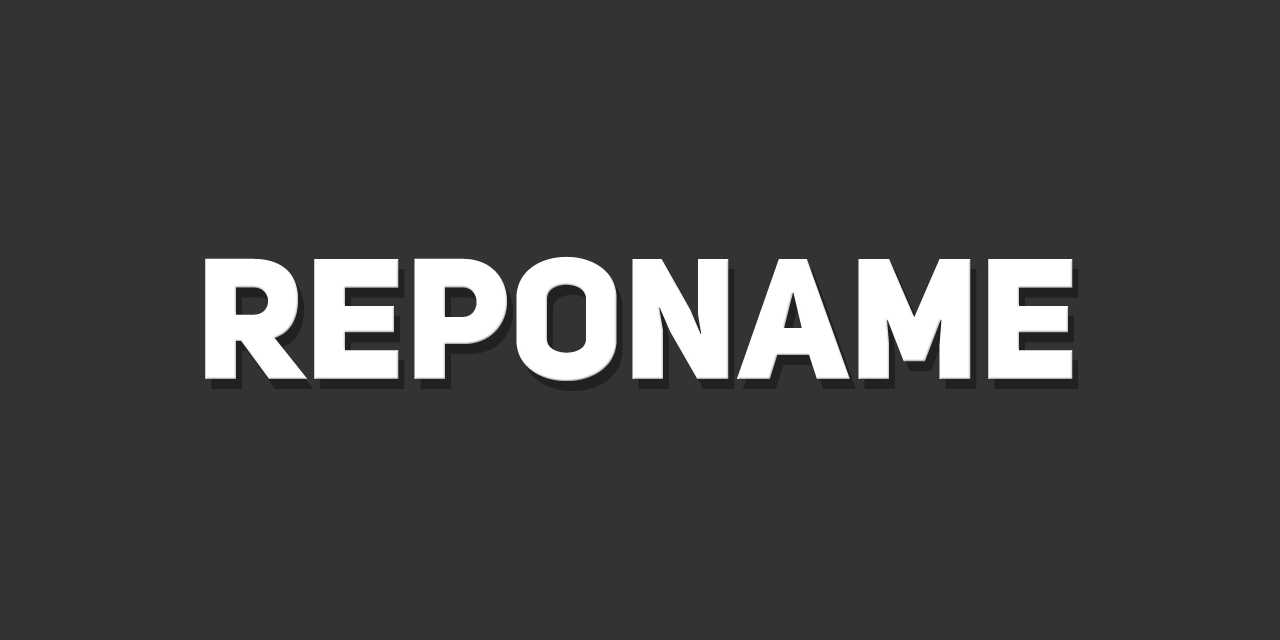
<style>
.page{position:relative;width:1280px;height:640px;background:#333333}
.page>*{position:absolute;margin:0}
.t1{font:170px "UniSansHeavyCAPS";color:#ffffff}
</style>
<div class="page">
<p class="t1" style="left:205px;top:256px;width:868px;height:125px">REPONAME</p>
</div>
